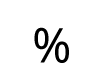
<style>
.page{position:relative;width:105px;height:83px;background:#ffffff}
.page>*{position:absolute;margin:0}
.t1{font:47.9px "DroidSans";color:#000000}
</style>
<div class="page">
<p class="t1" style="left:34px;top:27px;width:35px;height:36px">%</p>
</div>
